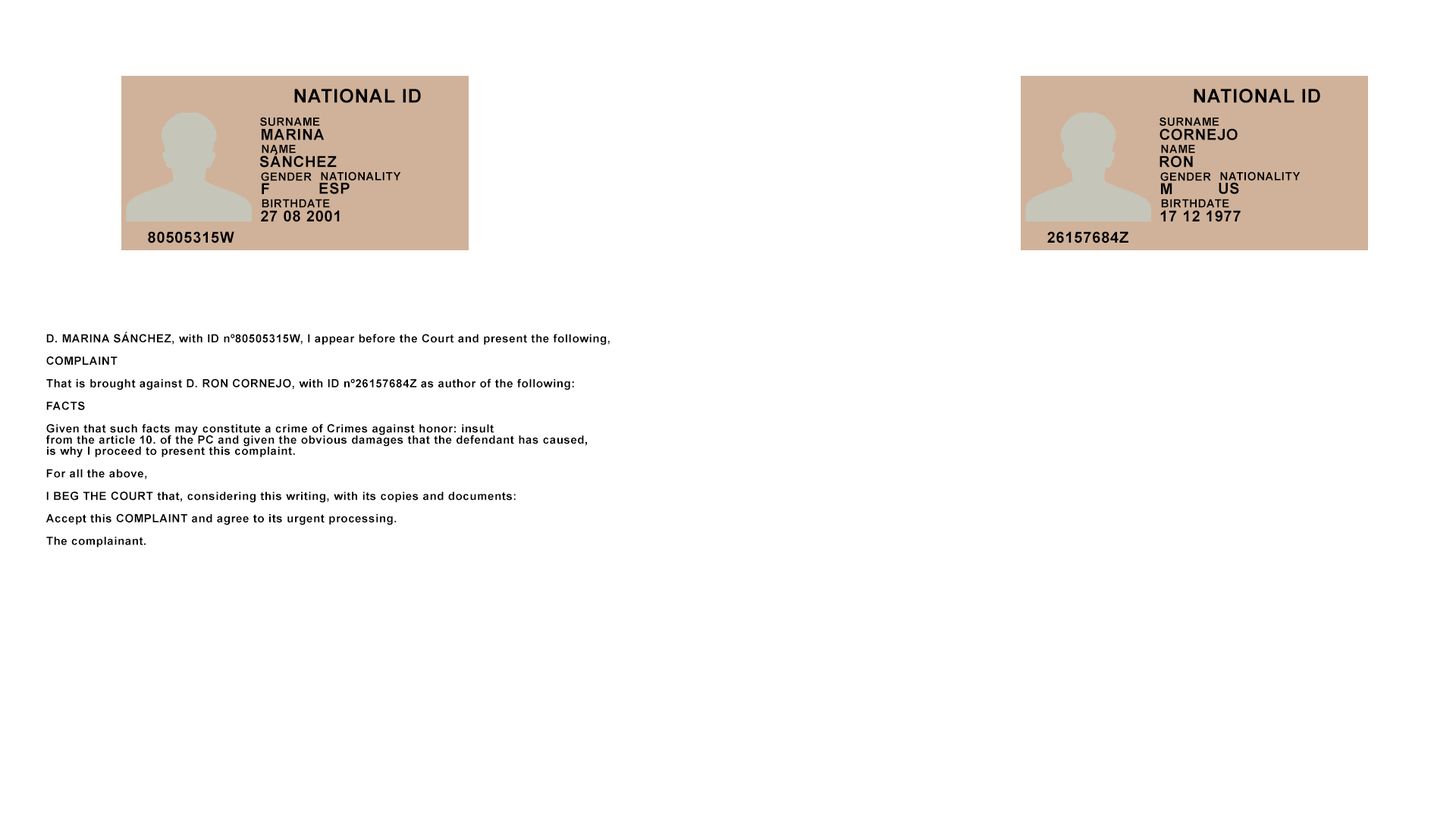
<style>
.page{position:relative;width:1456px;height:819px;background:#ffffff}
.page>*{position:absolute;margin:0}
.t1{font:19px "Arial-BoldMT";letter-spacing:0.041em;color:#000000}
.t2{font:11.4px "Arial-BoldMT";letter-spacing:0.041em;color:#000000}
.t3{font:15.2px "Arial-BoldMT";letter-spacing:0.041em;color:#000000}
.t4{font:11.4px/11.3px "Arial-BoldMT";letter-spacing:0.041em;color:#000000}
</style>
<div class="page">
<p class="t1" style="left:294px;top:89px;width:127px;height:14px">NATIONAL ID</p>
<p class="t1" style="left:1194px;top:89px;width:126px;height:14px">NATIONAL ID</p>
<p class="t2" style="left:260px;top:117px;width:60px;height:9px">SURNAME</p>
<p class="t2" style="left:1159px;top:117px;width:60px;height:9px">SURNAME</p>
<p class="t3" style="left:262px;top:129px;width:63px;height:11px">MARINA</p>
<p class="t3" style="left:1159px;top:128px;width:79px;height:12px">CORNEJO</p>
<p class="t2" style="left:262px;top:145px;width:34px;height:8px">NAME</p>
<p class="t2" style="left:1161px;top:145px;width:34px;height:8px">NAME</p>
<p class="t3" style="left:259px;top:152px;width:78px;height:16px">SÁNCHEZ</p>
<p class="t3" style="left:1159px;top:155px;width:34px;height:13px">RON</p>
<p class="t2" style="left:261px;top:172px;width:51px;height:9px">GENDER</p>
<p class="t2" style="left:321px;top:171px;width:80px;height:9px">NATIONALITY</p>
<p class="t2" style="left:1160px;top:172px;width:51px;height:9px">GENDER</p>
<p class="t2" style="left:1220px;top:171px;width:81px;height:9px">NATIONALITY</p>
<p class="t3" style="left:262px;top:183px;width:7px;height:11px">F</p>
<p class="t3" style="left:319px;top:182px;width:31px;height:12px">ESP</p>
<p class="t3" style="left:1161px;top:183px;width:11px;height:11px">M</p>
<p class="t3" style="left:1219px;top:182px;width:20px;height:12px">US</p>
<p class="t2" style="left:262px;top:199px;width:68px;height:9px">BIRTHDATE</p>
<p class="t2" style="left:1161px;top:199px;width:68px;height:9px">BIRTHDATE</p>
<p class="t3" style="left:261px;top:210px;width:79px;height:12px">27 08 2001</p>
<p class="t3" style="left:1160px;top:210px;width:81px;height:12px">17 12 1977</p>
<p class="t3" style="left:148px;top:231px;width:86px;height:12px">80505315W</p>
<p class="t3" style="left:1047px;top:231px;width:81px;height:12px">26157684Z</p>
<p class="t4" style="left:45px;top:331px;width:565px;height:217px">D. MARINA SÁNCHEZ, with ID nº80505315W, I appear before the Court and present the following,<br><br>COMPLAINT<br><br>That is brought against D. RON CORNEJO, with ID nº26157684Z as author of the following:<br><br>FACTS<br><br>Given that such facts may constitute a crime of Crimes against honor: insult<br>from the article 10. of the PC and given the obvious damages that the defendant has caused, <br>is why I proceed to present this complaint.<br><br>For all the above,<br><br>I BEG THE COURT that, considering this writing, with its copies and documents:<br><br>Accept this COMPLAINT and agree to its urgent processing.<br><br>The complainant.</p>
</div>
